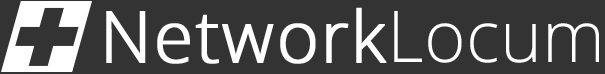
<style>
.page{position:relative;width:605px;height:74px;background:#333333}
.page>*{position:absolute;margin:0}
.t1{font:71.6px "OpenSans-Light";letter-spacing:0.01em;color:#ffffff;font-weight:bold}
.t2{font:71.6px "OpenSans-Light";color:#ffffff}
</style>
<div class="page">
<p class="t1" style="left:106px;top:7px;width:493px;height:57px">Network<span class="t2">Locum</span></p>
</div>
